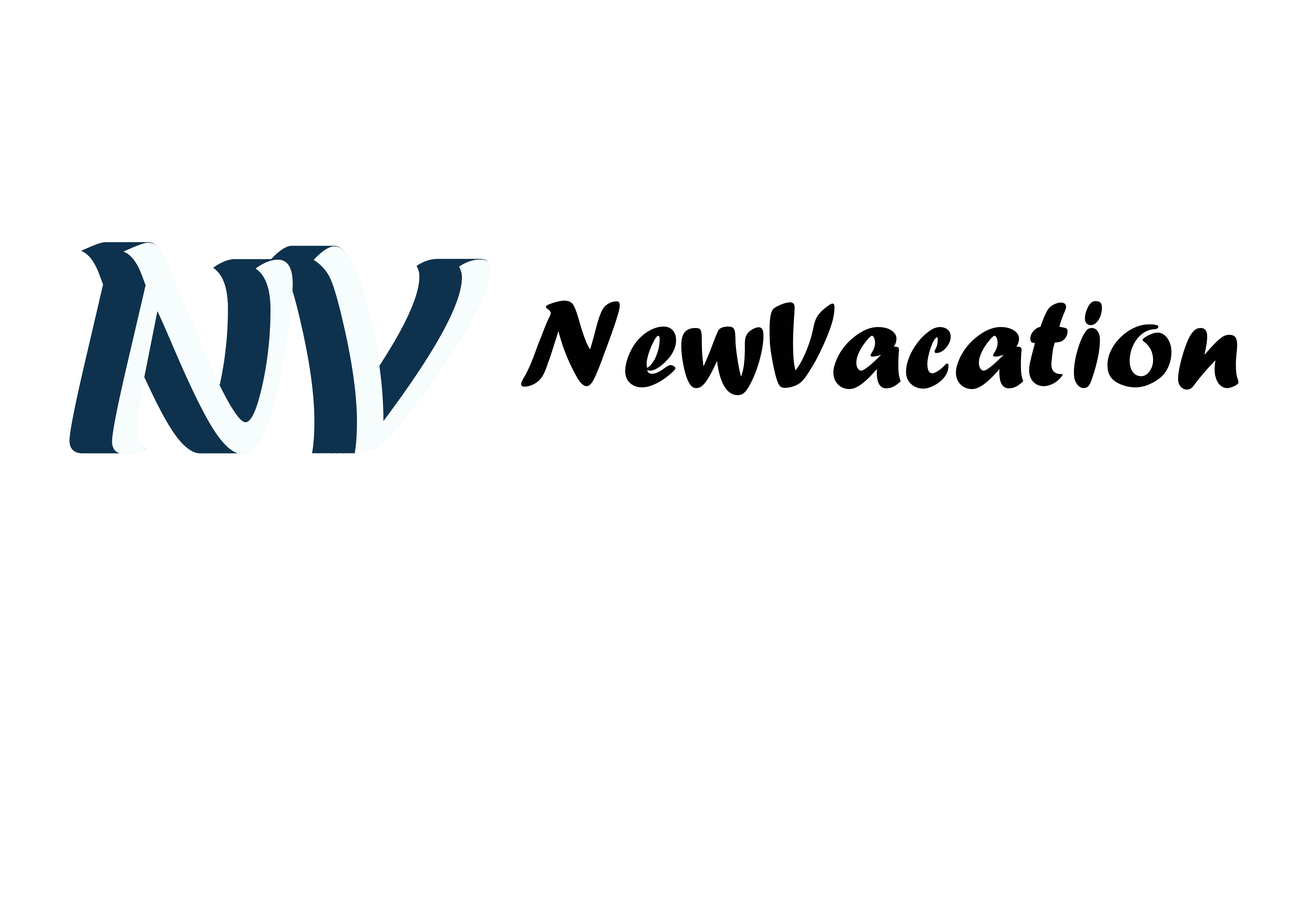
<style>
.page{position:relative;width:1292px;height:923px;background:#ffffff}
.page>*{position:absolute;margin:0}
.t1{font:128.2px "ForteMT";letter-spacing:0.01em;color:#010101}
</style>
<div class="page">
<p class="t1" style="left:521px;top:301px;width:718px;height:94px">NewVacation</p>
</div>
